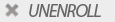
<style>
.page{position:relative;width:115px;height:22px;background:#ededed}
.page>*{position:absolute;margin:0}
.t1{font:18px "MyriadPro-It";letter-spacing:-0.05em;color:#666666;text-transform:uppercase}
</style>
<div class="page">
<p class="t1" style="left:29px;top:4px;width:72px;height:13px">Unenroll</p>
</div>
